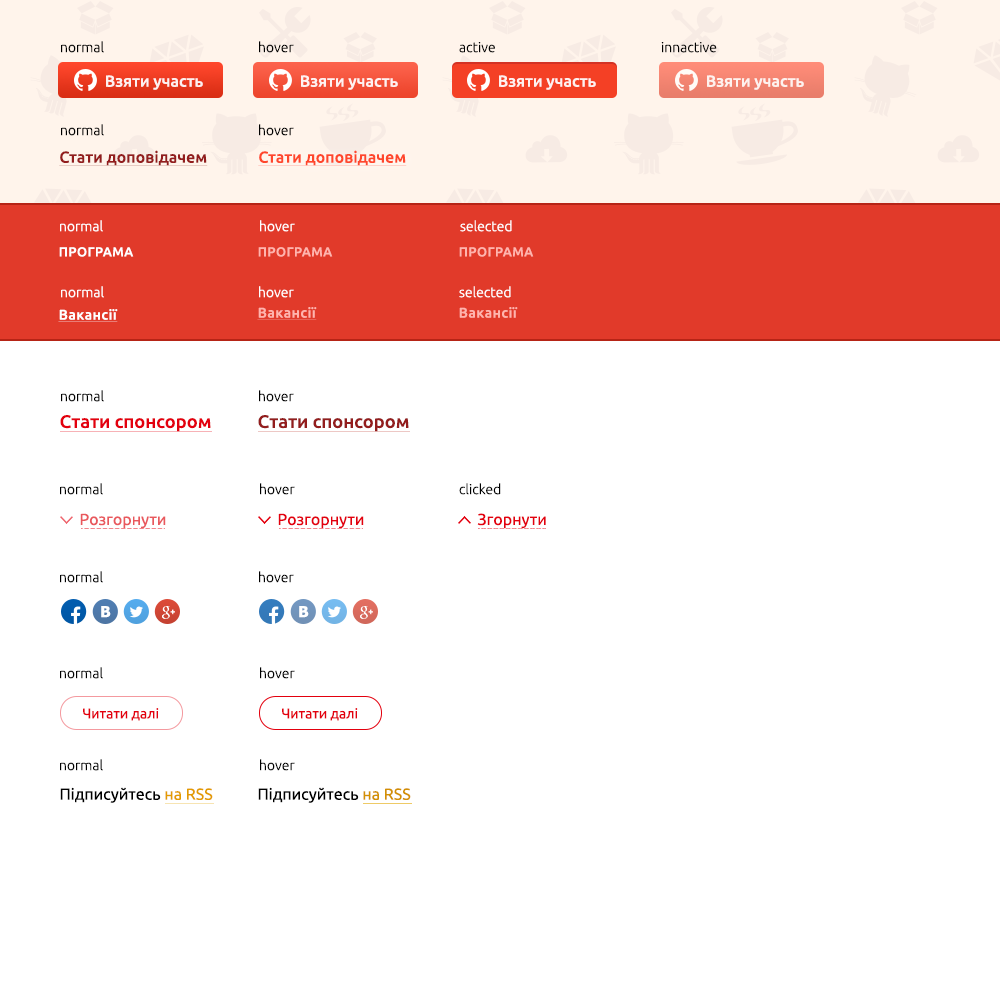
<style>
.page{position:relative;width:1000px;height:1000px;background:#ffffff}
.page>*{position:absolute;margin:0}
.t1{font:14px "Ubuntu-Light";color:#000000}
.t2{font:16px "Ubuntu-Medium";color:#ffffff}
.t3{font:16px "Ubuntu-Medium";color:#931d1d;text-decoration:underline}
.t4{font:16px "Ubuntu-Medium";color:#ff472c;text-decoration:underline}
.t5{font:14px "Ubuntu-Light";color:#ffffff}
.t6{font:13px "Ubuntu-Medium";letter-spacing:0.034em;color:#ffffff;text-transform:uppercase}
.t7{font:13px "Ubuntu-Medium";letter-spacing:0.034em;color:#ffb4ad;text-transform:uppercase}
.t8{font:14px "Ubuntu-Medium";letter-spacing:0.034em;color:#ffffff;text-decoration:underline}
.t9{font:14px "Ubuntu-Medium";letter-spacing:0.034em;color:#ffb4ad;text-decoration:underline}
.t10{font:14px "Ubuntu-Medium";letter-spacing:0.034em;color:#ffb4ad}
.t11{font:18px "Ubuntu-Medium";color:#e3000e}
.t12{font:18px "Ubuntu-Medium";color:#931d1d}
.t13{font:16px "Ubuntu";color:#e9585d}
.t14{font:16px "Ubuntu";color:#e3000e}
.t15{font:15px "Tahoma-Bold";color:#ffffff}
.t16{font:14px "Ubuntu";color:#e3000e}
.t17{font:16px "Ubuntu";color:#000000}
.t18{font:16px "Ubuntu";color:#e39b00}
.t19{font:16px "Ubuntu";color:#d39002}
</style>
<div class="page">
<p class="t1" style="left:61px;top:41px;width:43px;height:12px">normal</p>
<p class="t1" style="left:259px;top:41px;width:35px;height:12px">hover</p>
<p class="t1" style="left:459px;top:42px;width:36px;height:11px">active</p>
<p class="t1" style="left:661px;top:42px;width:56px;height:11px">innactive</p>
<p class="t2" style="left:106px;top:75px;width:97px;height:15px;opacity:0.9">Взяти участь</p>
<p class="t2" style="left:301px;top:75px;width:97px;height:15px;opacity:0.9">Взяти участь</p>
<p class="t2" style="left:499px;top:75px;width:97px;height:15px;opacity:0.9">Взяти участь</p>
<p class="t2" style="left:707px;top:75px;width:97px;height:15px;opacity:0.9">Взяти участь</p>
<p class="t1" style="left:61px;top:124px;width:43px;height:12px">normal</p>
<p class="t1" style="left:259px;top:124px;width:35px;height:12px">hover</p>
<p class="t3" style="left:59px;top:150px;width:149px;height:16px">Стати доповідачем</p>
<p class="t4" style="left:258px;top:150px;width:149px;height:16px">Стати доповідачем</p>
<p class="t5" style="left:60px;top:220px;width:43px;height:12px">normal</p>
<p class="t5" style="left:260px;top:220px;width:35px;height:12px">hover</p>
<p class="t5" style="left:460px;top:220px;width:52px;height:12px">selected</p>
<p class="t6" style="left:59px;top:247px;width:75px;height:10px">Програма</p>
<p class="t7" style="left:258px;top:247px;width:75px;height:10px">Програма</p>
<p class="t7" style="left:459px;top:247px;width:75px;height:10px">Програма</p>
<p class="t5" style="left:61px;top:286px;width:43px;height:12px">normal</p>
<p class="t5" style="left:259px;top:286px;width:35px;height:12px">hover</p>
<p class="t5" style="left:459px;top:286px;width:52px;height:12px">selected</p>
<p class="t8" style="left:58px;top:309px;width:60px;height:13px">Вакансії</p>
<p class="t9" style="left:257px;top:307px;width:60px;height:13px">Вакансії</p>
<p class="t10" style="left:459px;top:307px;width:59px;height:11px">Вакансії</p>
<p class="t1" style="left:61px;top:390px;width:43px;height:12px">normal</p>
<p class="t1" style="left:259px;top:390px;width:35px;height:12px">hover</p>
<p class="t11" style="left:60px;top:415px;width:151px;height:17px">Cтати спонсором</p>
<p class="t12" style="left:258px;top:415px;width:151px;height:17px">Cтати спонсором</p>
<p class="t1" style="left:60px;top:483px;width:43px;height:12px">normal</p>
<p class="t1" style="left:260px;top:483px;width:35px;height:12px">hover</p>
<p class="t1" style="left:459px;top:483px;width:42px;height:12px">clicked</p>
<p class="t13" style="left:80px;top:513px;width:86px;height:16px">Розгорнути</p>
<p class="t14" style="left:278px;top:513px;width:86px;height:16px">Розгорнути</p>
<p class="t14" style="left:477px;top:513px;width:69px;height:16px">Згорнути</p>
<p class="t1" style="left:60px;top:571px;width:43px;height:12px">normal</p>
<p class="t1" style="left:259px;top:571px;width:35px;height:12px">hover</p>
<p class="t15" style="left:101px;top:606px;width:10px;height:12px">В</p>
<p class="t15" style="left:299px;top:606px;width:10px;height:12px">В</p>
<p class="t1" style="left:60px;top:667px;width:43px;height:12px">normal</p>
<p class="t1" style="left:260px;top:667px;width:35px;height:12px">hover</p>
<p class="t16" style="left:83px;top:708px;width:76px;height:13px">Читати далі</p>
<p class="t16" style="left:282px;top:708px;width:76px;height:13px">Читати далі</p>
<p class="t1" style="left:60px;top:759px;width:43px;height:12px">normal</p>
<p class="t1" style="left:260px;top:759px;width:35px;height:12px">hover</p>
<p class="t17" style="left:60px;top:787px;width:153px;height:16px">Підписуйтесь <span class="t18">на RSS</span></p>
<p class="t17" style="left:258px;top:787px;width:153px;height:16px">Підписуйтесь <span class="t19">на RSS</span></p>
</div>
